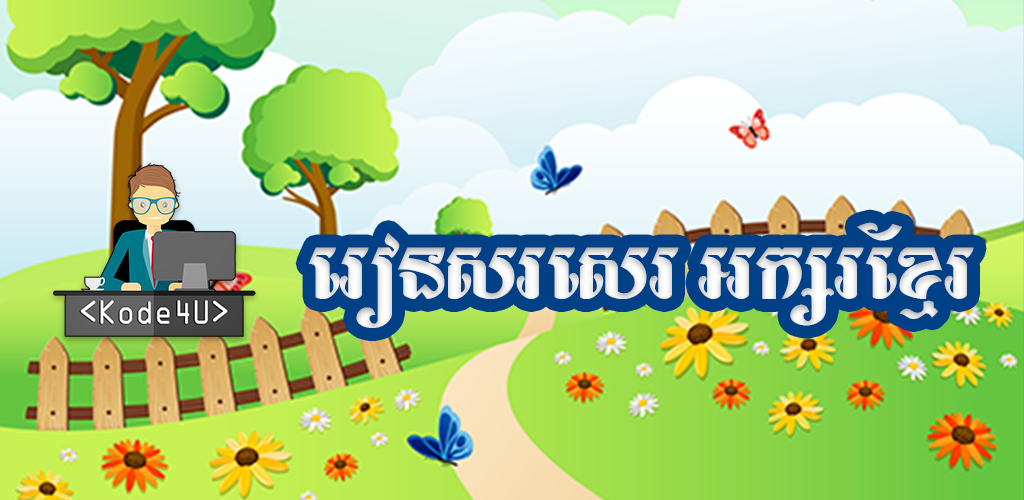
<style>
.page{position:relative;width:1024px;height:500px}
.page>*{position:absolute;margin:0}
.t1{font:81px "AngTasom";color:#ebebeb}
</style>
<div class="page">
<p class="t1" style="left:308px;top:222px;width:666px;height:106px">រៀនសរសេរ​ អក្សរខ្មែរ</p>
</div>
